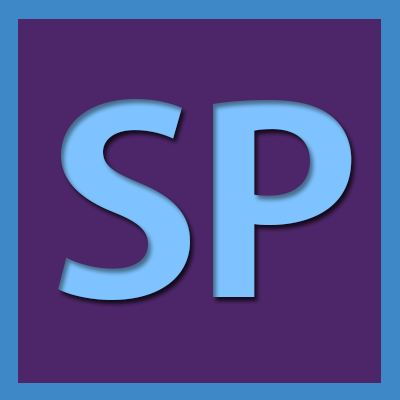
<style>
.page{position:relative;width:400px;height:400px;background:#4d2669}
.page>*{position:absolute;margin:0}
.t1{font:253px "AdobeGothicStd-Bold";letter-spacing:-0.03em;color:#7ec3ff;scale:1.11 1}
</style>
<div class="page">
<p class="t1" style="left:58px;top:99px;width:294px;height:201px">SP</p>
</div>
